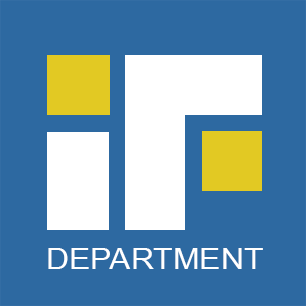
<style>
.page{position:relative;width:306px;height:306px;background:#2d69a1}
.page>*{position:absolute;margin:0}
.t1{font:29.2px "ArialMT";color:#ffffff;scale:1.1 1}
</style>
<div class="page">
<p class="t1" style="left:48px;top:248px;width:215px;height:21px">DEPARTMENT</p>
</div>
